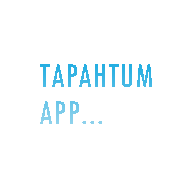
<style>
.page{position:relative;width:192px;height:192px;background:#ffffff}
.page>*{position:absolute;margin:0}
.t1{font:30.5px "Futura-CondensedMedium";letter-spacing:0.05em}
</style>
<div class="page">
<p class="t1" style="left:40px;top:64px;width:112px;height:60px">TAPAHTUM<br>APP...</p>
</div>
